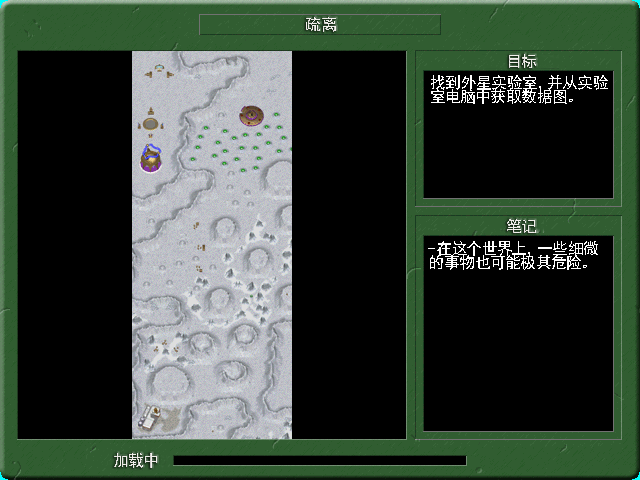
<style>
.page{position:relative;width:640px;height:480px;background:#000000}
.page>*{position:absolute;margin:0}
.t1{font:16px "SimHei";color:#f3f0ed}
.t2{font:16px/14px "SimHei";color:#ffffff}
</style>
<div class="page">
<p class="t1" style="left:306px;top:17px;width:30px;height:15px">疏离</p>
<p class="t1" style="left:509px;top:54px;width:27px;height:14px">目标</p>
<p class="t2" style="left:431px;top:75px;width:177px;height:29px">找到外星实验室，并从实验室电脑中获取数据图。</p>
<p class="t1" style="left:507px;top:219px;width:29px;height:14px">笔记</p>
<p class="t2" style="left:428px;top:241px;width:170px;height:29px">-在这个世界上，一些细微的事物也可能极其危险。</p>
<p class="t1" style="left:114px;top:453px;width:43px;height:15px">加载中</p>
</div>
